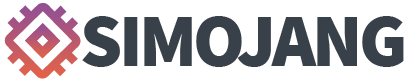
<style>
.page{position:relative;width:404px;height:83px;background:#ffffff}
.page>*{position:absolute;margin:0}
.t1{font:75px "SourceSansPro-Black";letter-spacing:-0.05em;color:#38414a}
</style>
<div class="page">
<p class="t1" style="left:82px;top:16px;width:322px;height:51px">SIMOJANG</p>
</div>
